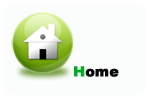
<style>
.page{position:relative;width:150px;height:100px;background:#fafdfb}
.page>*{position:absolute;margin:0}
.t1{font:14px "Arial-Black";color:#080808;font-weight:bold}
.t2{font:14px "Arial-Black";color:#03ab24;font-weight:bold}
</style>
<div class="page">
<p class="t1" style="left:74px;top:66px;width:45px;height:11px"><span class="t2">H</span>ome</p>
</div>
